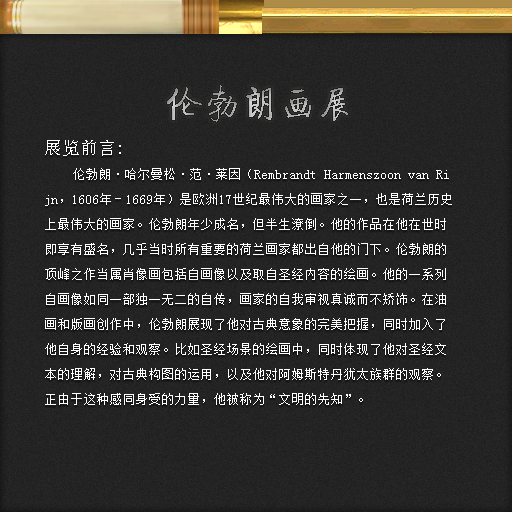
<style>
.page{position:relative;width:512px;height:512px}
.page>*{position:absolute;margin:0}
.t1{font:38px "JQiTi"}
.t2{font:13px/25px "SimSun";color:#ffffff}
.t3{font:18px/30px "SimSun";color:#ffffff}
</style>
<div class="page">
<p class="t1" style="left:167px;top:85px;width:181px;height:37px">伦勃朗画展</p>
<p class="t2" style="left:45px;top:140px;width:407px;height:265px"><span class="t3">展览前言:<br> </span>   伦勃朗·哈尔曼松·范·莱因（Rembrandt Harmenszoon van Ri<br>jn，1606年－1669年）是欧洲17世纪最伟大的画家之一，也是荷兰历史<br>上最伟大的画家。伦勃朗年少成名，但半生潦倒。他的作品在他在世时<br>即享有盛名，几乎当时所有重要的荷兰画家都出自他的门下。伦勃朗的<br>顶峰之作当属肖像画包括自画像以及取自圣经内容的绘画。他的一系列<br>自画像如同一部独一无二的自传，画家的自我审视真诚而不矫饰。在油<br>画和版画创作中，伦勃朗展现了他对古典意象的完美把握，同时加入了<br>他自身的经验和观察。比如圣经场景的绘画中，同时体现了他对圣经文<br>本的理解，对古典构图的运用，以及他对阿姆斯特丹犹太族群的观察。<br>正由于这种感同身受的力量，他被称为“文明的先知”。</p>
</div>
